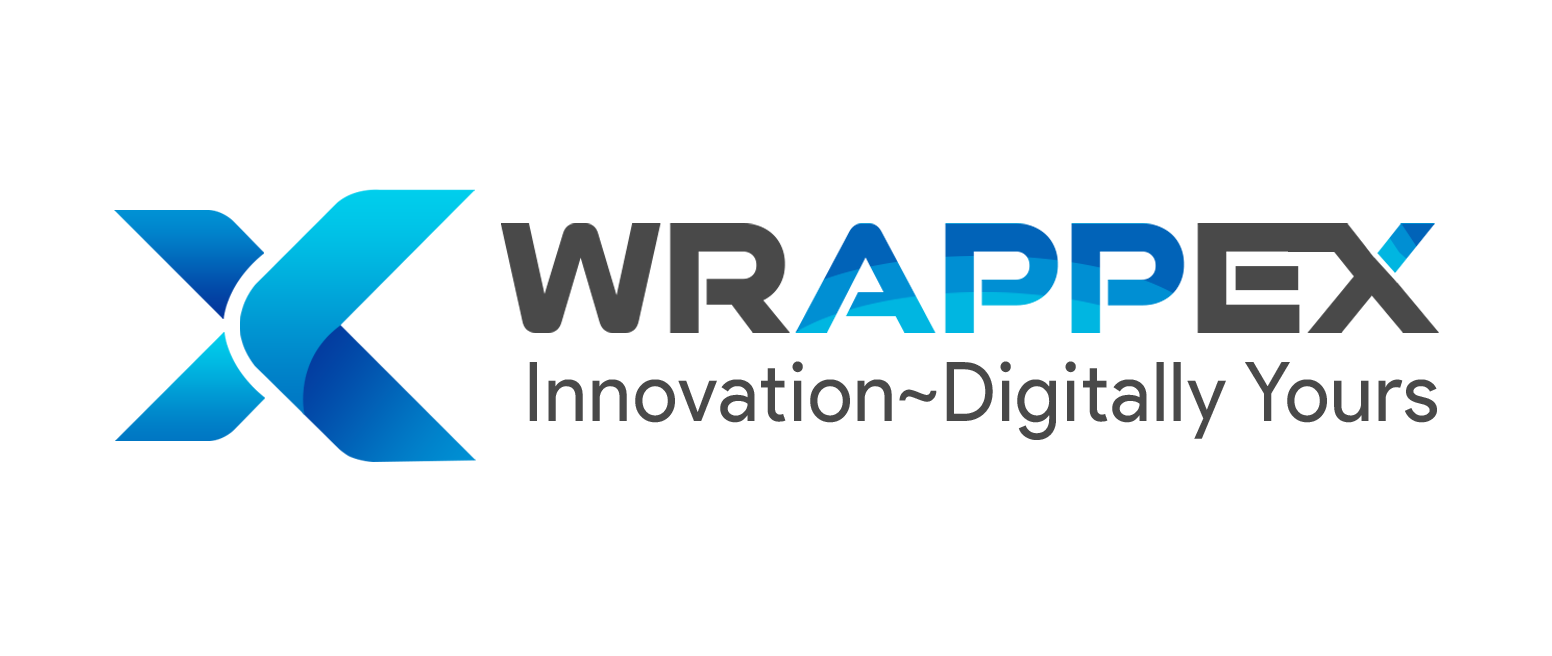
<style>
.page{position:relative;width:1552px;height:656px;background:#ffffff}
.page>*{position:absolute;margin:0}
.t1{font:82.2px "ProductSans-Regular";letter-spacing:0.02em;color:#494949;scale:0.96 1}
</style>
<div class="page">
<p class="t1" style="left:529px;top:361px;width:908px;height:79px">Innovation~Digitally Yours</p>
</div>
